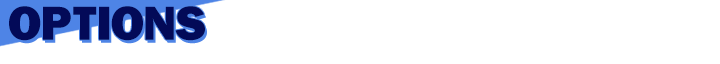
<style>
.page{position:relative;width:720px;height:64px;background:#ffffff}
.page>*{position:absolute;margin:0}
.t1{font:49.4px "FranklinGothic-Heavy";letter-spacing:0.05em;color:#030a58}
</style>
<div class="page">
<p class="t1" style="left:9px;top:6px;width:196px;height:35px">OPTIONS</p>
<p class="t1" style="left:11px;top:9px;width:196px;height:35px">OPTIONS</p>
</div>
